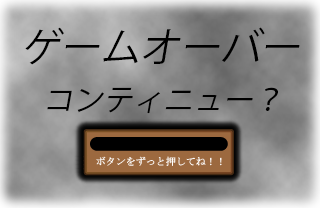
<style>
.page{position:relative;width:320px;height:208px}
.page>*{position:absolute;margin:0}
.t1{font:40px "KozGoPr6N-Regular";color:#000000;font-style:italic}
.t2{font:30px "KozGoPr6N-Regular";color:#000000;font-style:italic}
</style>
<div class="page">
<p class="t1" style="left:25px;top:27px;width:275px;height:38px">ゲームオーバー</p>
<p class="t2" style="left:47px;top:87px;width:231px;height:27px">コンティニュー？</p>
</div>
